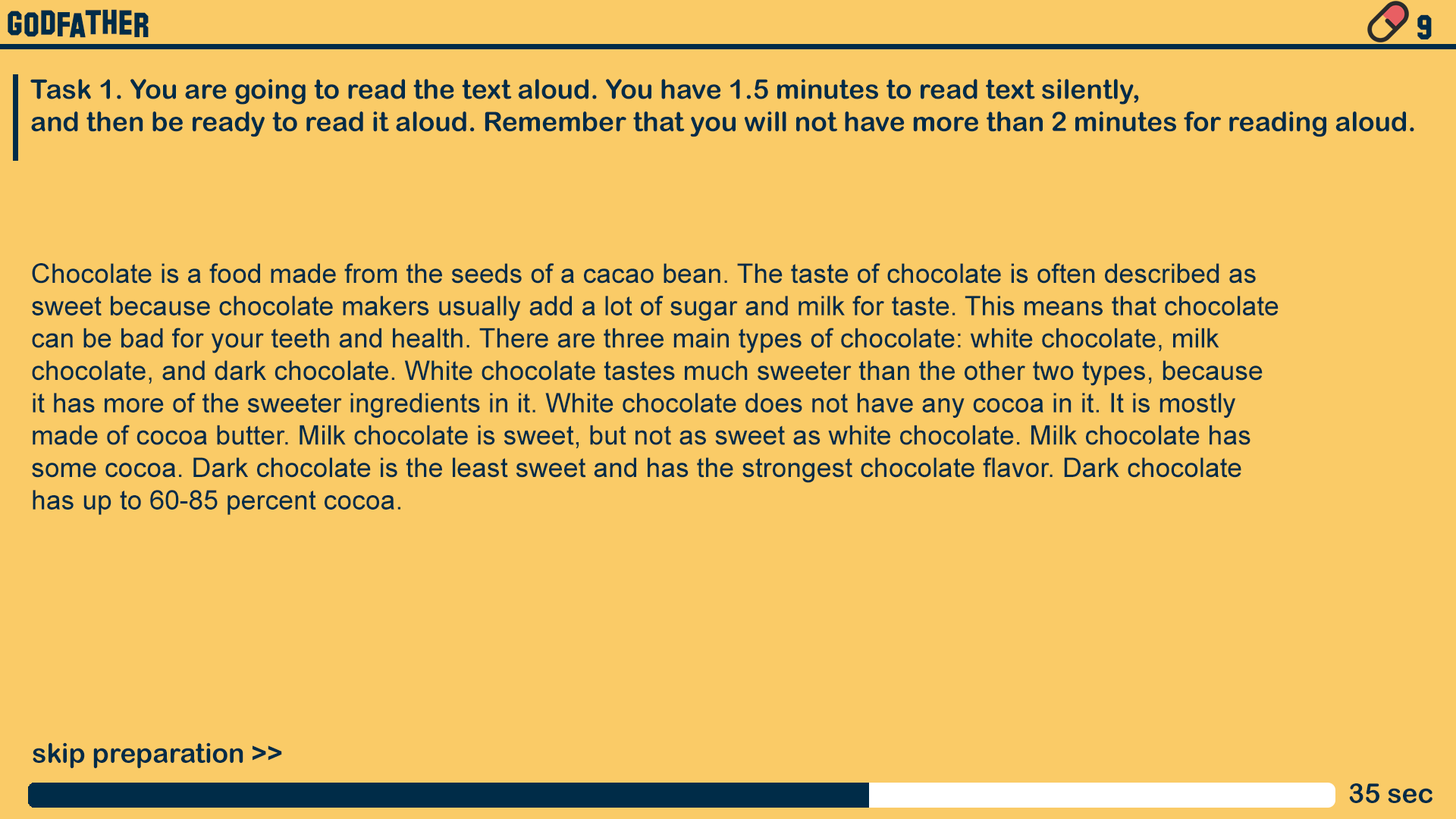
<style>
.page{position:relative;width:1456px;height:819px;background:#facb67}
.page>*{position:absolute;margin:0}
.t1{font:34.7px "HollywoodHills";color:#002c48}
.t2{font:27px "ArialRoundedMTBold";color:#002c48}
.t3{font:27px "ArialMT";color:#002c48}
</style>
<div class="page">
<p class="t1" style="left:8px;top:9px;width:141px;height:29px">godfather</p>
<p class="t1" style="left:1417px;top:14px;width:15px;height:25px">9</p>
<p class="t2" style="left:30px;top:79px;width:1384px;height:58px;text-align:justify">Task 1. You are going to read the text aloud. You have 1.5 minutes to read text silently,<br>and then be ready to read it aloud. Remember that you will not have more than 2 minutes for reading aloud.</p>
<p class="t3" style="left:32px;top:263px;width:1247px;height:252px;text-align:justify">Chocolate is a food made from the seeds of a cacao bean. The taste of chocolate is often described as<br>sweet because chocolate makers usually add a lot of sugar and milk for taste. This means that chocolate<br>can be bad for your teeth and health. There are three main types of chocolate: white chocolate, milk<br>chocolate, and dark chocolate. White chocolate tastes much sweeter than the other two types, because<br>it has more of the sweeter ingredients in it. White chocolate does not have any cocoa in it. It is mostly<br>made of cocoa butter. Milk chocolate is sweet, but not as sweet as white chocolate. Milk chocolate has<br>some cocoa. Dark chocolate is the least sweet and has the strongest chocolate flavor. Dark chocolate<br>has up to 60-85 percent cocoa.</p>
<p class="t2" style="left:33px;top:742px;width:249px;height:26px">skip preparation &gt;&gt;</p>
<p class="t2" style="left:1349px;top:783px;width:83px;height:20px">35 sec</p>
</div>
